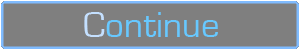
<style>
.page{position:relative;width:300px;height:50px;background:#7f7f7f}
.page>*{position:absolute;margin:0}
.t1{font:37.4px "EurostileRegular";color:#67c8ff}
.t2{font:37.4px "EurostileRegular";color:#c4e0ff}
</style>
<div class="page">
<p class="t1" style="left:84px;top:12px;width:134px;height:25px"><span class="t2">C</span>ontinue</p>
</div>
